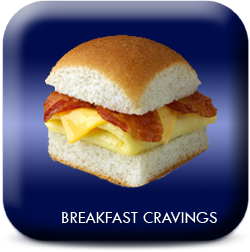
<style>
.page{position:relative;width:250px;height:252px}
.page>*{position:absolute;margin:0}
.t1{font:16.7px "TwCenMT-Regular";letter-spacing:0.01em;color:#ffffff;font-variant:small-caps}
</style>
<div class="page">
<p class="t1" style="left:62px;top:212px;width:155px;height:11px">BREAKFAST CRAVINGS</p>
</div>
